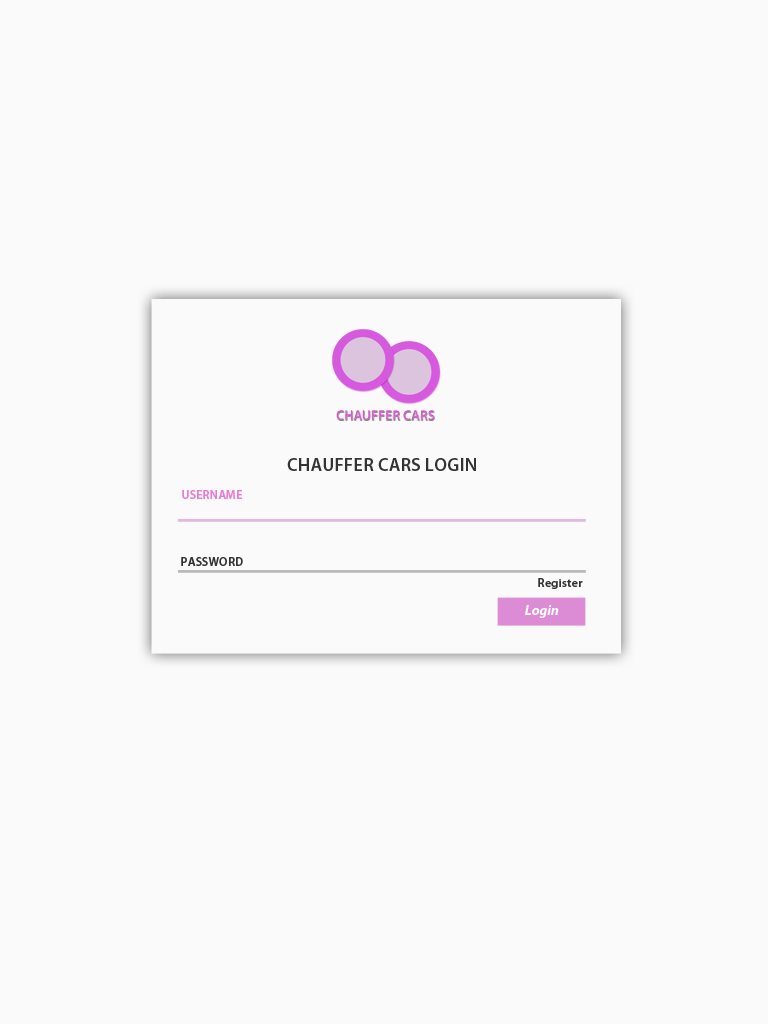
<style>
.page{position:relative;width:768px;height:1024px;background:#fafafa}
.page>*{position:absolute;margin:0}
.t1{font:18px "MyriadPro-Semibold";letter-spacing:0.02em;color:#333333}
.t2{font:12px "MyriadPro-Semibold";letter-spacing:0.02em;color:#e67cd6}
.t3{font:12px "MyriadPro-Semibold";letter-spacing:0.02em;color:#333333}
.t4{font:14px "MyriadPro-BoldIt";color:#ffffff}
</style>
<div class="page">
<p class="t1" style="left:287px;top:458px;width:189px;height:13px">CHAUFFER CARS LOGIN</p>
<p class="t2" style="left:182px;top:490px;width:61px;height:9px">USERNAME</p>
<p class="t3" style="left:181px;top:557px;width:62px;height:9px">PASSWORD</p>
<p class="t3" style="left:538px;top:578px;width:45px;height:11px">Register</p>
<p class="t4" style="left:525px;top:605px;width:34px;height:13px">Login</p>
</div>
